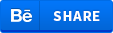
<style>
.page{position:relative;width:113px;height:33px}
.page>*{position:absolute;margin:0}
.t1{font:15px "SourceSansPro-Bold";letter-spacing:0.04em;color:#ffffff}
</style>
<div class="page">
<p class="t1" style="left:53px;top:11px;width:47px;height:10px">SHARE</p>
</div>
